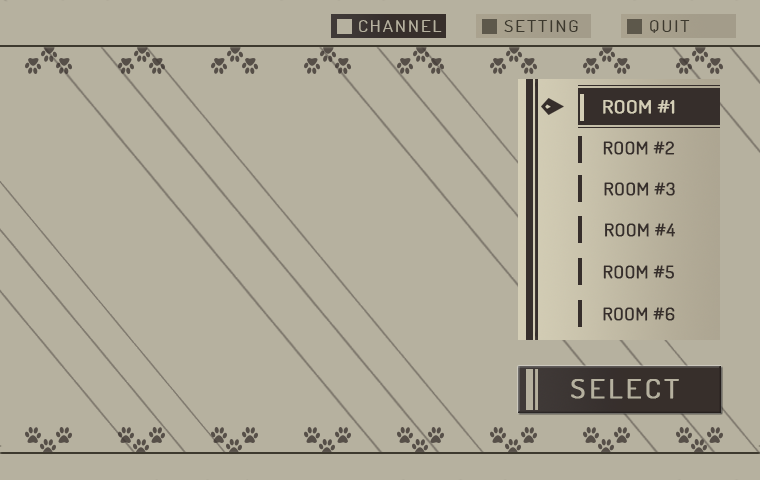
<style>
.page{position:relative;width:760px;height:480px;background:#b6b19f}
.page>*{position:absolute;margin:0}
.t1{font:16px "Dosis-Book";letter-spacing:0.1em;color:#b6b19f;scale:1.2 1}
.t2{font:16px "Dosis-Book";letter-spacing:0.1em;color:#3d392e;scale:1.2 1}
.t3{font:18px "Dosis-Book";color:#d4ceb6;font-weight:bold;scale:1.17 1}
.t4{font:16.5px "Dosis-Book";color:#362e2b;font-weight:bold;scale:1.17 1}
.t5{font:25px "Dosis-Book";letter-spacing:0.1em;color:#b6b19f;font-weight:bold;scale:1.2 1}
</style>
<div class="page">
<p class="t1" style="left:359px;top:20px;width:83px;height:12px">CHANNEL</p>
<p class="t1" style="left:359px;top:20px;width:83px;height:12px">CHANNEL</p>
<p class="t2" style="left:504px;top:20px;width:74px;height:12px">SETTING</p>
<p class="t2" style="left:650px;top:20px;width:40px;height:13px">QUIT</p>
<p class="t3" style="left:603px;top:100px;width:72px;height:14px">ROOM #1</p>
<p class="t4" style="left:603px;top:141px;width:72px;height:14px">ROOM #2</p>
<p class="t4" style="left:604px;top:182px;width:71px;height:14px">ROOM #3</p>
<p class="t4" style="left:605px;top:223px;width:70px;height:14px">ROOM #4</p>
<p class="t4" style="left:603px;top:265px;width:71px;height:14px">ROOM #5</p>
<p class="t4" style="left:603px;top:307px;width:72px;height:14px">ROOM #6</p>
<p class="t5" style="left:571px;top:379px;width:108px;height:20px">SELECT</p>
<p class="t5" style="left:571px;top:379px;width:108px;height:20px">SELECT</p>
</div>
